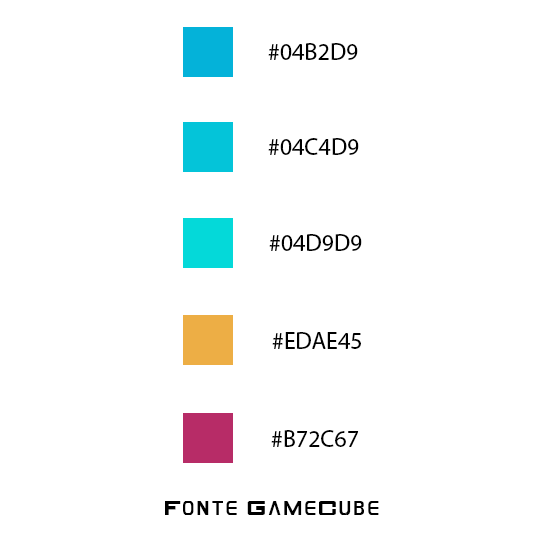
<style>
.page{position:relative;width:550px;height:550px;background:#ffffff}
.page>*{position:absolute;margin:0}
.t1{font:24px "MyriadPro-Regular";color:#000000}
.t2{font:18px "GAMECUBENDualSet";color:#000000}
</style>
<div class="page">
<p class="t1" style="left:268px;top:43px;width:90px;height:17px">#04B2D9</p>
<p class="t1" style="left:268px;top:138px;width:91px;height:17px">#04C4D9</p>
<p class="t1" style="left:269px;top:234px;width:93px;height:17px">#04D9D9</p>
<p class="t1" style="left:272px;top:332px;width:89px;height:17px">#EDAE45</p>
<p class="t1" style="left:271px;top:430px;width:88px;height:17px">#B72C67</p>
<p class="t2" style="left:165px;top:501px;width:214px;height:14px">Fonte GameCube</p>
</div>
